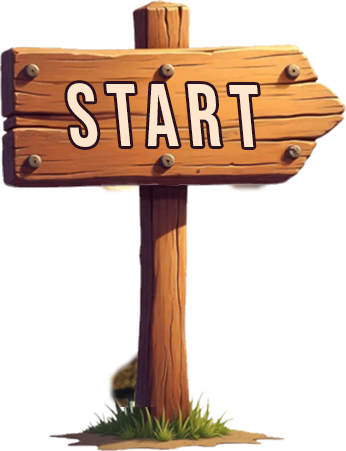
<style>
.page{position:relative;width:346px;height:451px;background:#ffffff}
.page>*{position:absolute;margin:0}
.t1{font:88.8px "BebasNeue-Regular";letter-spacing:0.13em;color:#ffe6cd;scale:0.92 1}
</style>
<div class="page">
<p class="t1" style="left:67px;top:83px;width:191px;height:64px">STart</p>
</div>
